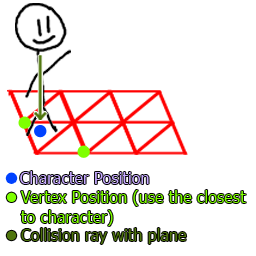
<style>
.page{position:relative;width:256px;height:256px;background:#ffffff}
.page>*{position:absolute;margin:0}
.t1{font:16.3px "Tahoma";color:#7eff00}
.t2{font:16.3px "Tahoma";color:#4f750d}
</style>
<div class="page">
<p class="t1" style="left:21px;top:190px;width:225px;height:36px">Vertex Position (use the closest<br>to character)</p>
<p class="t2" style="left:21px;top:228px;width:166px;height:16px">Collision ray with plane</p>
</div>
